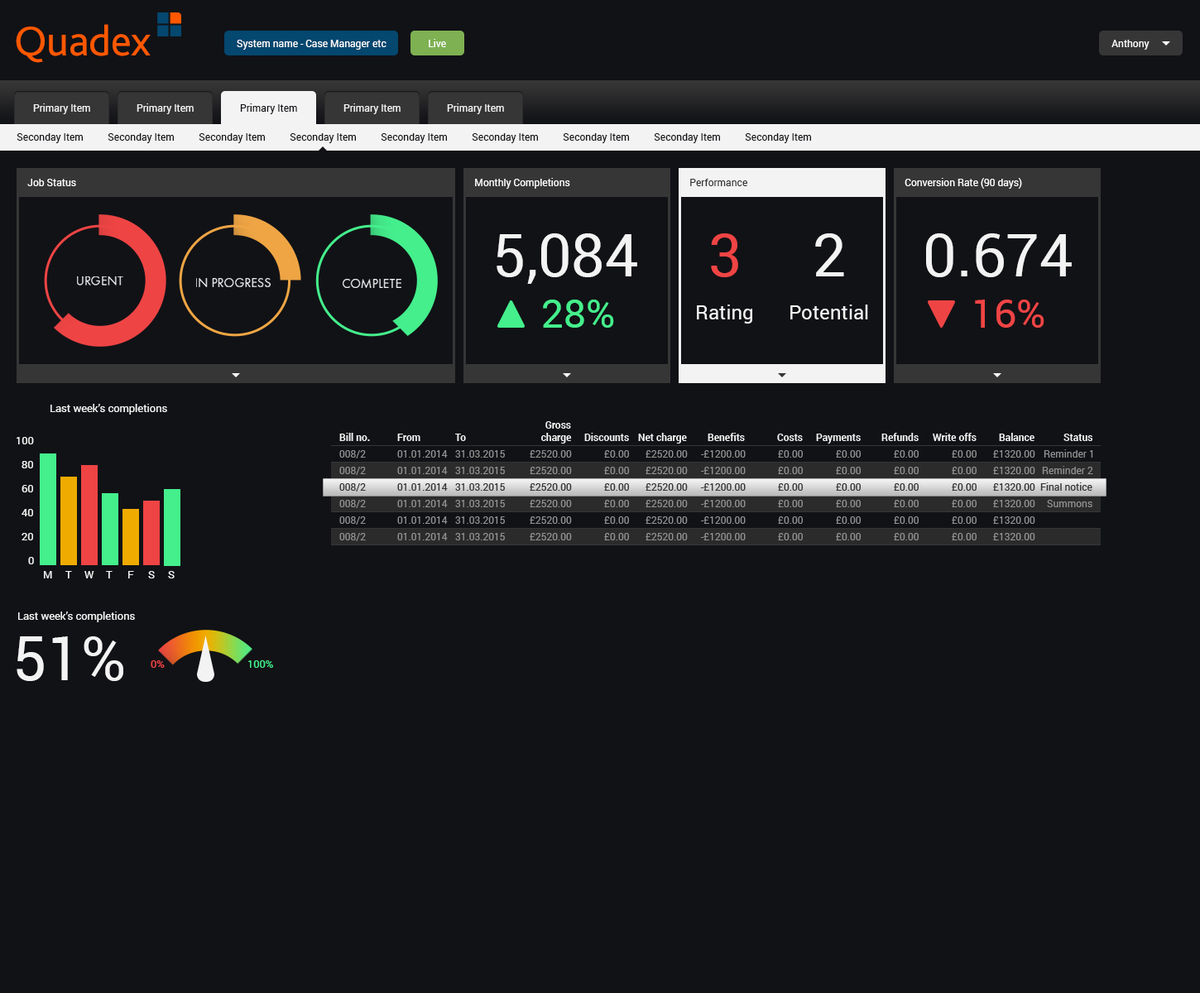
<style>
.page{position:relative;width:1200px;height:993px;background:#111216}
.page>*{position:absolute;margin:0}
.t1{font:43.7px "Bliss2";letter-spacing:-0.01em;color:#ff5800}
.t2{font:9.9px "Roboto-Regular";color:#ffffff}
.t3{font:9.9px "Roboto-Regular";color:#f3f3f3}
.t4{font:9.9px "Roboto-Regular";color:#111216}
.t5{font:9.9px "Roboto-Regular";color:#363636}
.t6{font:59.6px "Roboto-Regular";color:#f3f3f3}
.t7{font:59.6px "Roboto-Regular";color:#ef4444}
.t8{font:13.3px "FunctionPro-Book";color:#ffffff}
.t9{font:39.7px "Roboto-Regular";color:#44ef8c}
.t10{font:19.9px "Roboto-Regular";color:#f3f3f3}
.t11{font:39.7px "Roboto-Regular";color:#ef4444}
.t12{font:10.7px "Roboto-Regular";color:#f3f3f3}
.t13{font:9.9px "Roboto-Bold";color:#f3f3f3}
.t14{font:9.9px "Roboto-Regular";color:#929292}
.t15{font:61.3px "Roboto-Regular";color:#f3f3f3}
.t16{font:10.7px "Roboto-Regular";color:#ef4444}
.t17{font:10.7px "Roboto-Regular";color:#44ef8c}
</style>
<div class="page">
<p class="t1" style="left:16px;top:24px;width:135px;height:39px">Quadex</p>
<p class="t2" style="left:237px;top:40px;width:150px;height:10px">System name - Case Manager etc</p>
<p class="t2" style="left:429px;top:39px;width:17px;height:8px">Live</p>
<p class="t2" style="left:1112px;top:40px;width:38px;height:10px">Anthony</p>
<p class="t3" style="left:33px;top:103px;width:57px;height:11px">Primary Item</p>
<p class="t3" style="left:137px;top:103px;width:57px;height:11px">Primary Item</p>
<p class="t4" style="left:240px;top:103px;width:57px;height:11px">Primary Item</p>
<p class="t3" style="left:344px;top:103px;width:57px;height:11px">Primary Item</p>
<p class="t3" style="left:447px;top:103px;width:57px;height:11px">Primary Item</p>
<p class="t4" style="left:17px;top:133px;width:66px;height:10px">Seconday Item</p>
<p class="t4" style="left:108px;top:133px;width:66px;height:10px">Seconday Item</p>
<p class="t4" style="left:199px;top:133px;width:66px;height:10px">Seconday Item</p>
<p class="t4" style="left:290px;top:133px;width:66px;height:10px">Seconday Item</p>
<p class="t4" style="left:381px;top:133px;width:66px;height:10px">Seconday Item</p>
<p class="t4" style="left:472px;top:133px;width:66px;height:10px">Seconday Item</p>
<p class="t4" style="left:563px;top:133px;width:66px;height:10px">Seconday Item</p>
<p class="t4" style="left:654px;top:133px;width:66px;height:10px">Seconday Item</p>
<p class="t4" style="left:745px;top:133px;width:66px;height:10px">Seconday Item</p>
<p class="t2" style="left:27px;top:179px;width:49px;height:7px">Job Status</p>
<p class="t2" style="left:475px;top:178px;width:95px;height:11px">Monthly Completions</p>
<p class="t5" style="left:690px;top:179px;width:58px;height:7px">Performance</p>
<p class="t2" style="left:905px;top:178px;width:117px;height:11px">Conversion Rate (90 days)</p>
<p class="t6" style="left:497px;top:233px;width:140px;height:51px">5,084</p>
<p class="t7" style="left:711px;top:233px;width:27px;height:44px">3</p>
<p class="t6" style="left:815px;top:233px;width:29px;height:43px">2</p>
<p class="t6" style="left:926px;top:233px;width:146px;height:44px">0.674</p>
<p class="t8" style="left:77px;top:276px;width:46px;height:10px">URGENT</p>
<p class="t8" style="left:196px;top:278px;width:75px;height:9px">IN PROGRESS</p>
<p class="t8" style="left:343px;top:279px;width:58px;height:9px">COMPLETE</p>
<p class="t9" style="left:543px;top:300px;width:71px;height:28px">28%</p>
<p class="t10" style="left:697px;top:305px;width:55px;height:19px">Rating</p>
<p class="t10" style="left:791px;top:305px;width:77px;height:15px">Potential</p>
<p class="t11" style="left:975px;top:300px;width:70px;height:28px">16%</p>
<p class="t12" style="left:50px;top:404px;width:117px;height:11px">Last week’s completions</p>
<p class="t13" style="left:546px;top:421px;width:25px;height:8px">Gross</p>
<p class="t12" style="left:17px;top:437px;width:17px;height:8px">100</p>
<p class="t13" style="left:339px;top:433px;width:31px;height:8px">Bill no.</p>
<p class="t13" style="left:397px;top:434px;width:24px;height:7px">From</p>
<p class="t13" style="left:455px;top:434px;width:11px;height:7px">To</p>
<p class="t13" style="left:541px;top:433px;width:31px;height:11px">charge</p>
<p class="t13" style="left:584px;top:433px;width:45px;height:8px">Discounts</p>
<p class="t13" style="left:638px;top:433px;width:49px;height:11px">Net charge</p>
<p class="t13" style="left:708px;top:433px;width:37px;height:8px">Benefits</p>
<p class="t13" style="left:777px;top:434px;width:26px;height:7px">Costs</p>
<p class="t13" style="left:816px;top:434px;width:45px;height:10px">Payments</p>
<p class="t13" style="left:882px;top:433px;width:37px;height:8px">Refunds</p>
<p class="t13" style="left:933px;top:433px;width:44px;height:8px">Write offs</p>
<p class="t13" style="left:999px;top:433px;width:36px;height:8px">Balance</p>
<p class="t13" style="left:1064px;top:434px;width:29px;height:7px">Status</p>
<p class="t14" style="left:1044px;top:450px;width:50px;height:8px">Reminder 1</p>
<p class="t12" style="left:22px;top:461px;width:11px;height:8px">80</p>
<p class="t14" style="left:339px;top:450px;width:27px;height:9px">008/2</p>
<p class="t14" style="left:397px;top:450px;width:51px;height:8px">01.01.2014</p>
<p class="t14" style="left:455px;top:450px;width:50px;height:8px">31.03.2015</p>
<p class="t14" style="left:530px;top:450px;width:42px;height:8px">£2520.00</p>
<p class="t14" style="left:604px;top:450px;width:25px;height:8px">£0.00</p>
<p class="t14" style="left:646px;top:450px;width:42px;height:8px">£2520.00</p>
<p class="t14" style="left:701px;top:450px;width:45px;height:8px">-£1200.00</p>
<p class="t14" style="left:778px;top:450px;width:25px;height:8px">£0.00</p>
<p class="t14" style="left:836px;top:450px;width:25px;height:8px">£0.00</p>
<p class="t14" style="left:894px;top:450px;width:25px;height:8px">£0.00</p>
<p class="t14" style="left:952px;top:450px;width:25px;height:8px">£0.00</p>
<p class="t14" style="left:993px;top:450px;width:43px;height:8px">£1320.00</p>
<p class="t14" style="left:339px;top:467px;width:27px;height:8px">008/2</p>
<p class="t14" style="left:397px;top:467px;width:51px;height:7px">01.01.2014</p>
<p class="t14" style="left:455px;top:467px;width:50px;height:7px">31.03.2015</p>
<p class="t14" style="left:530px;top:467px;width:42px;height:7px">£2520.00</p>
<p class="t14" style="left:604px;top:467px;width:25px;height:7px">£0.00</p>
<p class="t14" style="left:646px;top:467px;width:42px;height:7px">£2520.00</p>
<p class="t14" style="left:701px;top:467px;width:45px;height:7px">-£1200.00</p>
<p class="t14" style="left:778px;top:467px;width:25px;height:7px">£0.00</p>
<p class="t14" style="left:836px;top:467px;width:25px;height:7px">£0.00</p>
<p class="t14" style="left:894px;top:467px;width:25px;height:7px">£0.00</p>
<p class="t14" style="left:952px;top:467px;width:25px;height:7px">£0.00</p>
<p class="t14" style="left:993px;top:467px;width:43px;height:7px">£1320.00</p>
<p class="t14" style="left:1042px;top:466px;width:52px;height:8px">Reminder 2</p>
<p class="t12" style="left:22px;top:485px;width:11px;height:8px">60</p>
<p class="t5" style="left:339px;top:483px;width:27px;height:9px">008/2</p>
<p class="t5" style="left:397px;top:483px;width:51px;height:8px">01.01.2014</p>
<p class="t5" style="left:455px;top:483px;width:50px;height:8px">31.03.2015</p>
<p class="t5" style="left:530px;top:483px;width:42px;height:8px">£2520.00</p>
<p class="t5" style="left:604px;top:483px;width:25px;height:8px">£0.00</p>
<p class="t5" style="left:646px;top:483px;width:42px;height:8px">£2520.00</p>
<p class="t5" style="left:701px;top:483px;width:45px;height:8px">-£1200.00</p>
<p class="t5" style="left:778px;top:483px;width:25px;height:8px">£0.00</p>
<p class="t5" style="left:836px;top:483px;width:25px;height:8px">£0.00</p>
<p class="t5" style="left:894px;top:483px;width:25px;height:8px">£0.00</p>
<p class="t5" style="left:952px;top:483px;width:25px;height:8px">£0.00</p>
<p class="t5" style="left:993px;top:483px;width:43px;height:8px">£1320.00</p>
<p class="t5" style="left:1041px;top:483px;width:52px;height:8px">Final notice</p>
<p class="t12" style="left:22px;top:509px;width:11px;height:8px">40</p>
<p class="t14" style="left:339px;top:500px;width:27px;height:8px">008/2</p>
<p class="t14" style="left:397px;top:500px;width:51px;height:7px">01.01.2014</p>
<p class="t14" style="left:455px;top:500px;width:50px;height:7px">31.03.2015</p>
<p class="t14" style="left:530px;top:500px;width:42px;height:7px">£2520.00</p>
<p class="t14" style="left:604px;top:500px;width:25px;height:7px">£0.00</p>
<p class="t14" style="left:646px;top:500px;width:42px;height:7px">£2520.00</p>
<p class="t14" style="left:701px;top:500px;width:45px;height:7px">-£1200.00</p>
<p class="t14" style="left:778px;top:500px;width:25px;height:7px">£0.00</p>
<p class="t14" style="left:836px;top:500px;width:25px;height:7px">£0.00</p>
<p class="t14" style="left:894px;top:500px;width:25px;height:7px">£0.00</p>
<p class="t14" style="left:952px;top:500px;width:25px;height:7px">£0.00</p>
<p class="t14" style="left:993px;top:500px;width:43px;height:7px">£1320.00</p>
<p class="t14" style="left:1047px;top:500px;width:46px;height:7px">Summons</p>
<p class="t14" style="left:339px;top:517px;width:27px;height:8px">008/2</p>
<p class="t14" style="left:397px;top:517px;width:51px;height:7px">01.01.2014</p>
<p class="t14" style="left:455px;top:517px;width:50px;height:7px">31.03.2015</p>
<p class="t14" style="left:530px;top:517px;width:42px;height:7px">£2520.00</p>
<p class="t14" style="left:604px;top:517px;width:25px;height:7px">£0.00</p>
<p class="t14" style="left:646px;top:517px;width:42px;height:7px">£2520.00</p>
<p class="t14" style="left:701px;top:517px;width:45px;height:7px">-£1200.00</p>
<p class="t14" style="left:778px;top:517px;width:25px;height:7px">£0.00</p>
<p class="t14" style="left:836px;top:517px;width:25px;height:7px">£0.00</p>
<p class="t14" style="left:894px;top:517px;width:25px;height:7px">£0.00</p>
<p class="t14" style="left:952px;top:517px;width:25px;height:7px">£0.00</p>
<p class="t14" style="left:993px;top:517px;width:43px;height:7px">£1320.00</p>
<p class="t12" style="left:22px;top:533px;width:11px;height:8px">20</p>
<p class="t14" style="left:339px;top:533px;width:27px;height:8px">008/2</p>
<p class="t14" style="left:397px;top:533px;width:51px;height:8px">01.01.2014</p>
<p class="t14" style="left:455px;top:533px;width:50px;height:8px">31.03.2015</p>
<p class="t14" style="left:530px;top:533px;width:42px;height:8px">£2520.00</p>
<p class="t14" style="left:604px;top:533px;width:25px;height:8px">£0.00</p>
<p class="t14" style="left:646px;top:533px;width:42px;height:8px">£2520.00</p>
<p class="t14" style="left:701px;top:533px;width:45px;height:8px">-£1200.00</p>
<p class="t14" style="left:778px;top:533px;width:25px;height:8px">£0.00</p>
<p class="t14" style="left:836px;top:533px;width:25px;height:8px">£0.00</p>
<p class="t14" style="left:894px;top:533px;width:25px;height:8px">£0.00</p>
<p class="t14" style="left:952px;top:533px;width:25px;height:8px">£0.00</p>
<p class="t14" style="left:993px;top:533px;width:43px;height:8px">£1320.00</p>
<p class="t12" style="left:28px;top:557px;width:6px;height:8px">0</p>
<p class="t12" style="left:44px;top:571px;width:8px;height:8px">M</p>
<p class="t12" style="left:65px;top:571px;width:7px;height:8px">T</p>
<p class="t12" style="left:84px;top:571px;width:10px;height:8px">W</p>
<p class="t12" style="left:106px;top:571px;width:7px;height:8px">T</p>
<p class="t12" style="left:128px;top:571px;width:6px;height:8px">F</p>
<p class="t12" style="left:148px;top:571px;width:7px;height:8px">S</p>
<p class="t12" style="left:168px;top:571px;width:7px;height:8px">S</p>
<p class="t12" style="left:18px;top:612px;width:117px;height:11px">Last week’s completions</p>
<p class="t15" style="left:17px;top:637px;width:106px;height:44px">51%</p>
<p class="t16" style="left:151px;top:661px;width:14px;height:7px">0%</p>
<p class="t17" style="left:248px;top:661px;width:25px;height:7px">100%</p>
</div>
